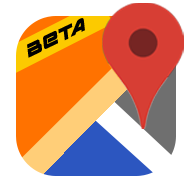
<style>
.page{position:relative;width:192px;height:192px;background:#ffffff}
.page>*{position:absolute;margin:0}
.t1{font:24.5px "SpaceRangerBoldItalic";letter-spacing:0.025em;color:#000000}
</style>
<div class="page">
<p class="t1" style="left:27px;top:18px;width:58px;height:40px;rotate:-25deg">BETA</p>
</div>
